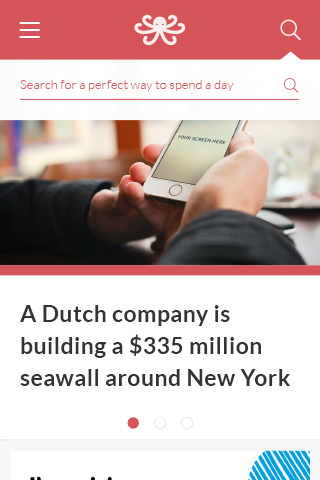
<style>
.page{position:relative;width:320px;height:480px;background:#ffffff}
.page>*{position:absolute;margin:0}
.t1{font:13px "Lato-Light";color:#d55e60}
.t2{font:23px/32px "Lato-Bold";letter-spacing:0.02em;color:#333333}
</style>
<div class="page">
<p class="t1" style="left:20px;top:80px;width:214px;height:11px">Search for a perfect way to spend a day</p>
<p class="t2" style="left:20px;top:305px;width:270px;height:81px">A Dutch company is <br>building a $335 million <br>seawall around New York</p>
</div>
